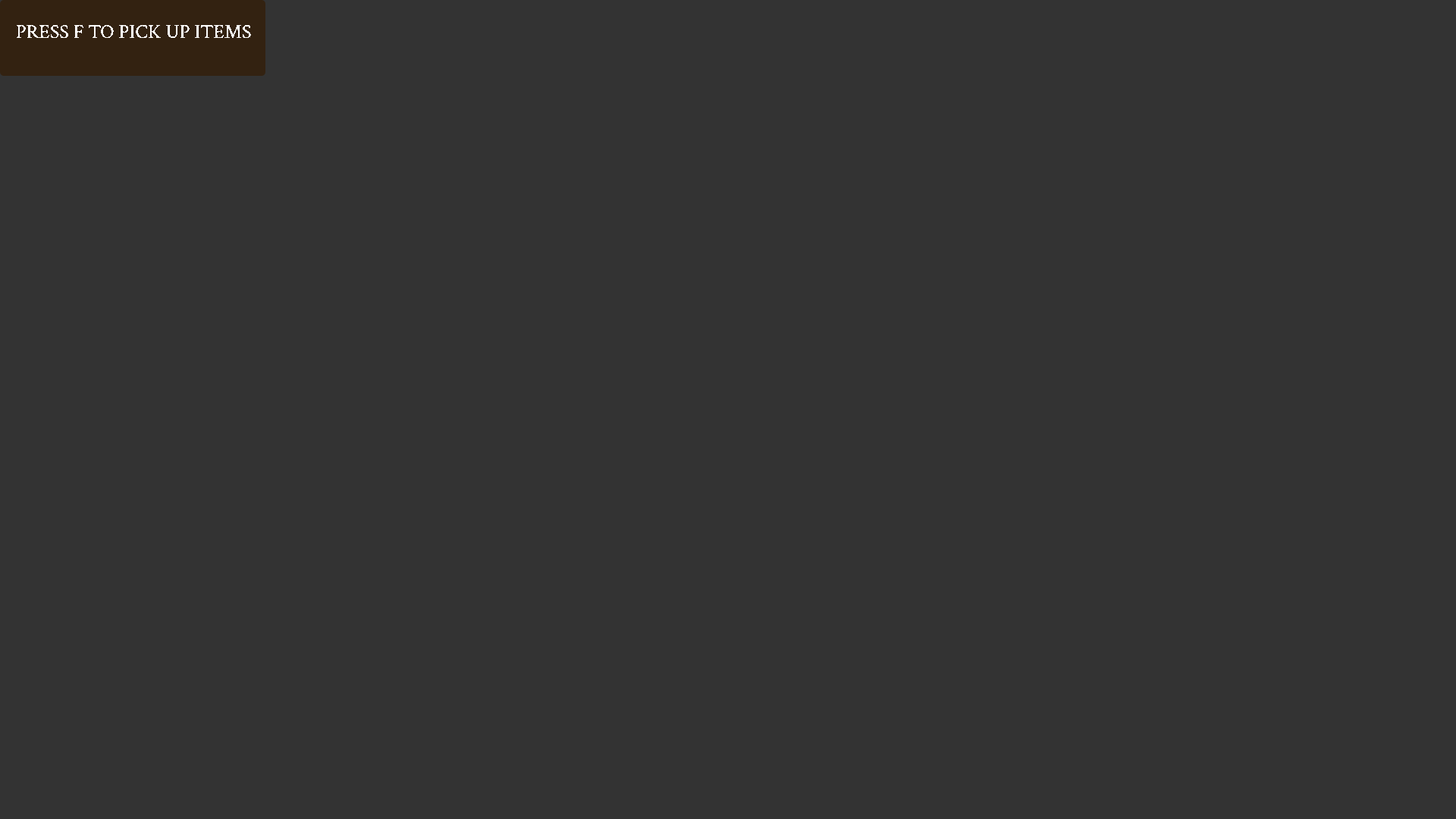
<style>
.page{position:relative;width:1456px;height:819px;background:#333333}
.page>*{position:absolute;margin:0}
.t1{font:19.7px "CrimsonText-Regular";color:#ffffff}
</style>
<div class="page">
<p class="t1" style="left:17px;top:25px;width:234px;height:13px">PRESS F TO PICK UP ITEMS</p>
</div>
